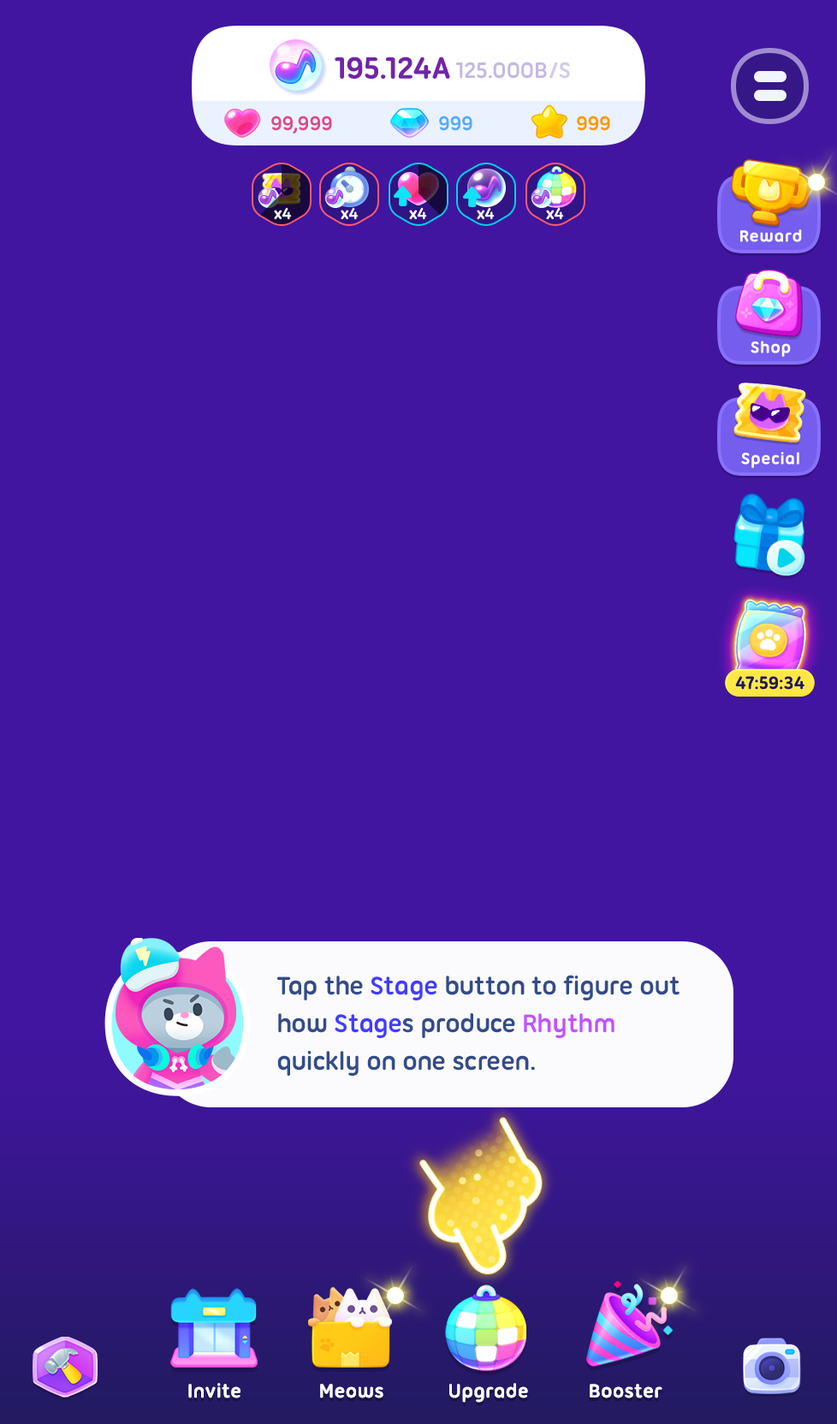
<style>
.page{position:relative;width:837px;height:1424px;background:#4115a0}
.page>*{position:absolute;margin:0}
.t1{font:27.4px/37.7px "UbuntuTitling-Bold";letter-spacing:-0.025em;color:#324c89}
.t2{font:27.4px/37.7px "UbuntuTitling-Bold";letter-spacing:-0.025em;color:#413cff}
.t3{font:27.4px/37.7px "UbuntuTitling-Bold";letter-spacing:-0.025em;color:#c053ff}
.t4{font:20.5px "UbuntuTitling-Bold";letter-spacing:-0.025em;color:#ffffff}
</style>
<div class="page">
<p class="t1" style="left:277px;top:975px;width:403px;height:101px">Tap the <span class="t2">Stage</span> button to figure out<br>how <span class="t2">Stage</span>s produce <span class="t3">Rhythm</span><br>quickly on one screen.</p>
<p class="t4" style="left:188px;top:1383px;width:53px;height:16px">Invite</p>
<p class="t4" style="left:320px;top:1384px;width:63px;height:15px">Meows</p>
<p class="t4" style="left:449px;top:1383px;width:79px;height:20px">Upgrade</p>
<p class="t4" style="left:590px;top:1384px;width:73px;height:15px">Booster</p>
</div>
